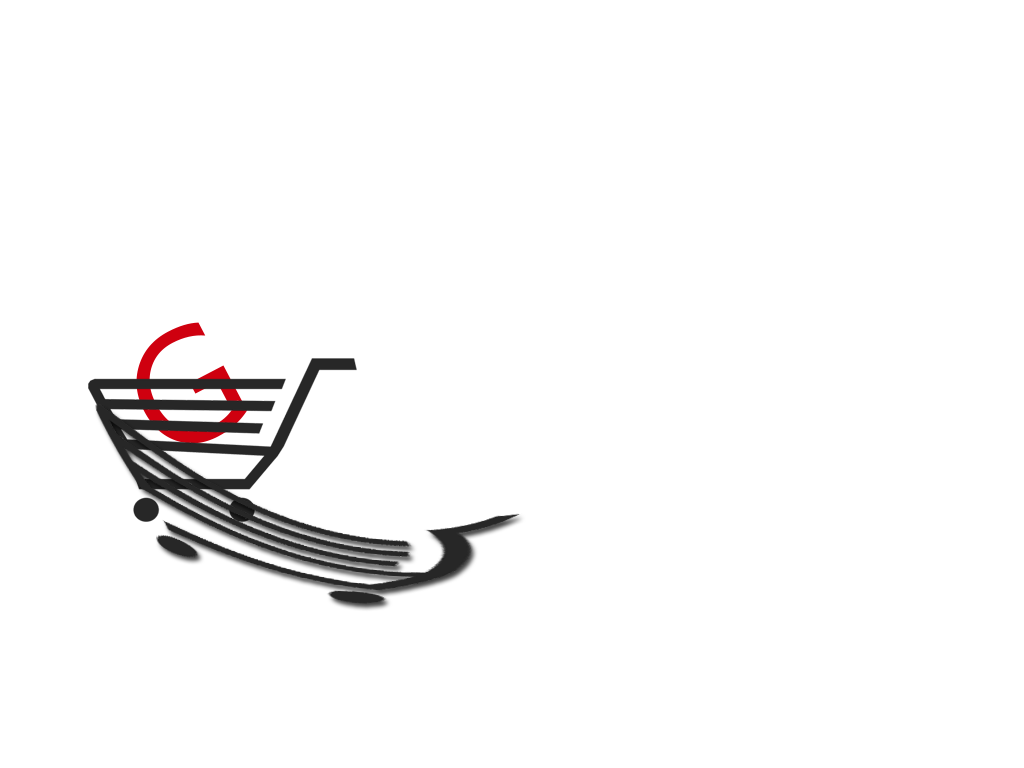
<style>
.page{position:relative;width:1024px;height:768px;background:#ffffff}
.page>*{position:absolute;margin:0}
.t1{font:160.3px "Ebrima";color:#cf000f}
</style>
<div class="page">
<p class="t1" style="left:136px;top:322px;width:111px;height:122px;rotate:-28deg">G</p>
</div>
